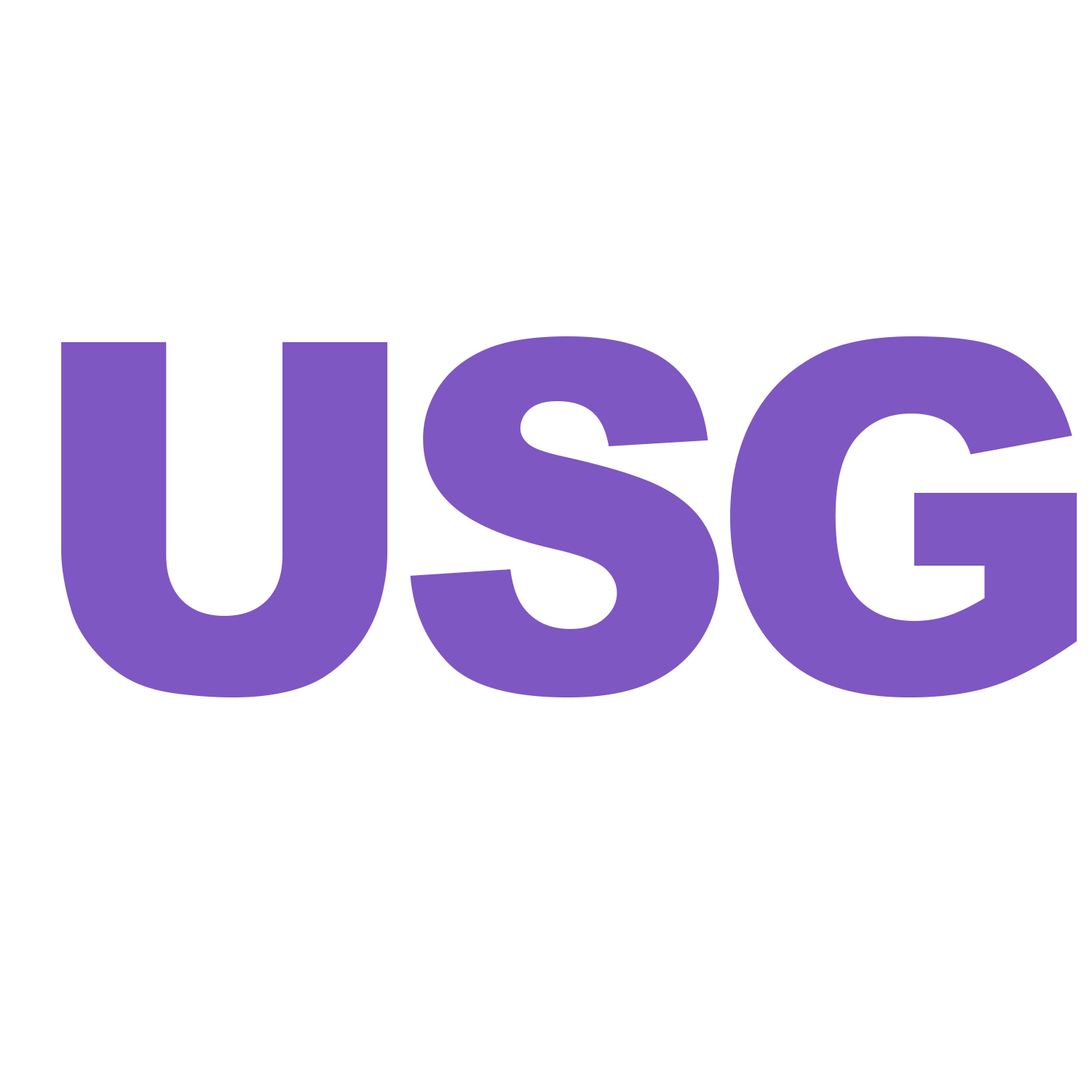
<style>
.page{position:relative;width:1092px;height:1092px;background:#ffffff}
.page>*{position:absolute;margin:0}
.t1{font:488.4px "Arial-Black";letter-spacing:-0.06em;color:#7e57c2}
</style>
<div class="page">
<p class="t1" style="left:61px;top:336px;width:1016px;height:361px">USG</p>
</div>
